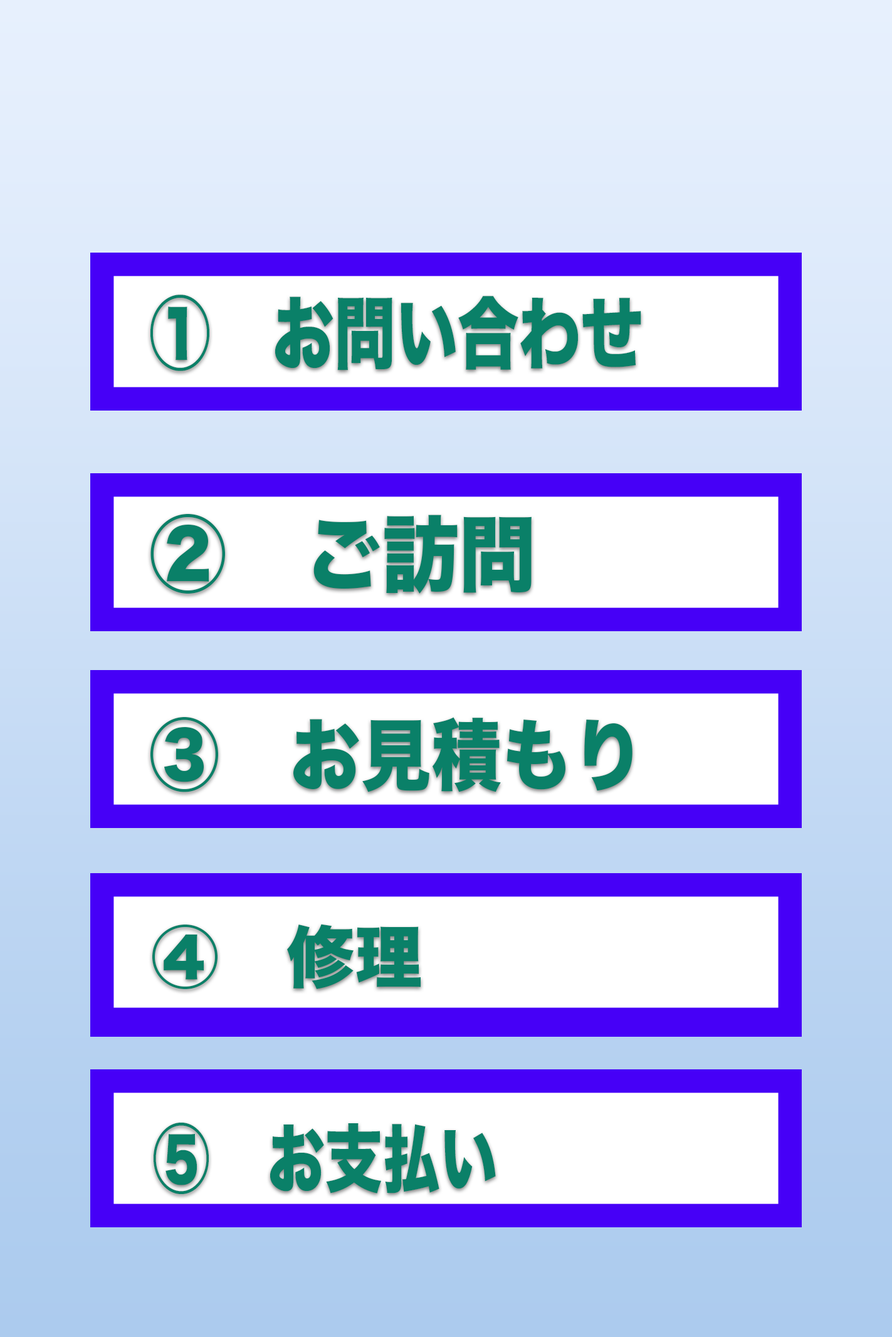
<style>
.page{position:relative;width:892px;height:1337px;background:#ffffff}
.page>*{position:absolute;margin:0}
.t1{font:79px "HiraKakuStd-W8";color:#0a8068;scale:0.78 1}
.t2{font:83.1px "HiraKakuStd-W8";color:#0a8068;scale:0.93 1}
.t3{font:78px "HiraKakuStd-W8";color:#0a8068;scale:0.9 1}
.t4{font:67.3px "HiraKakuStd-W8";color:#0a8068}
.t5{font:74.3px "HiraKakuStd-W8";color:#0a8068;scale:0.77 1}
</style>
<div class="page">
<p class="t1" style="left:150px;top:295px;width:491px;height:76px">①　お問い合わせ</p>
<p class="t2" style="left:150px;top:513px;width:382px;height:81px">②　ご訪問</p>
<p class="t3" style="left:150px;top:717px;width:482px;height:75px">③　お見積もり</p>
<p class="t4" style="left:152px;top:924px;width:269px;height:66px">④　修理</p>
<p class="t5" style="left:154px;top:1123px;width:342px;height:71px">⑤　お支払い</p>
</div>
